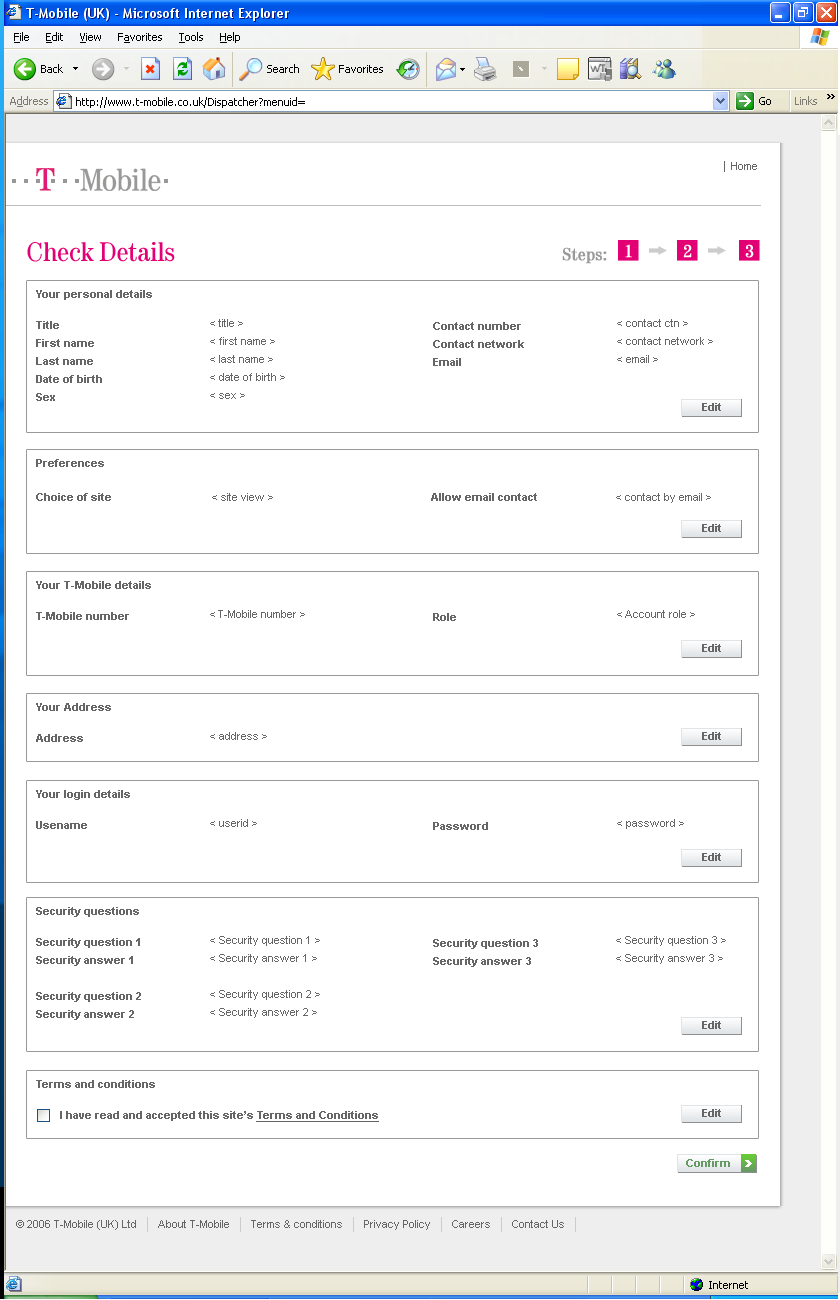
<style>
.page{position:relative;width:840px;height:1300px;background:#ffffff}
.page>*{position:absolute;margin:0}
.t1{font:28px "Tele-Antiqua";color:#e20074}
.t2{font:18px "Tele-Antiqua";color:#ffffff;font-weight:bold}
.t3{font:18px "Tele-Antiqua";color:#999999;font-weight:bold}
.t4{font:11px/18px "Arial-BoldMT";color:#666666}
.t5{font:11px "Arial-BoldMT";color:#666666}
.t6{font:11px/18px "ArialMT";color:#666666}
.t7{font:11px "ArialMT";color:#666666}
.t8{font:11px/18px "Arial-BoldMT";color:#666666;text-decoration:underline}
.t9{font:11px "Arial-BoldMT";color:#669a65}
</style>
<div class="page">
<p class="t1" style="left:27px;top:242px;width:148px;height:20px">Check Details</p>
<p class="t2" style="left:625px;top:244px;width:7px;height:14px">1</p>
<p class="t2" style="left:683px;top:244px;width:9px;height:14px">2</p>
<p class="t2" style="left:745px;top:244px;width:9px;height:14px">3</p>
<p class="t3" style="left:562px;top:247px;width:45px;height:17px">Steps:</p>
<p class="t4" style="left:36px;top:290px;width:116px;height:111px"><span class="t5">Your personal details<br><br></span>Title<br>First name<br>Last name<br>Date of birth<br>Sex</p>
<p class="t6" style="left:210px;top:319px;width:75px;height:80px">&lt; title &gt;<br>&lt; first name &gt;<br>&lt; last name &gt;<br>&lt; date of birth &gt;<br>&lt; sex &gt;</p>
<p class="t4" style="left:433px;top:322px;width:91px;height:44px">Contact number<br>Contact network<br>Email</p>
<p class="t6" style="left:617px;top:319px;width:96px;height:44px">&lt; contact ctn &gt;<br>&lt; contact network &gt;<br>&lt; email &gt;</p>
<p class="t5" style="left:702px;top:403px;width:19px;height:8px">Edit</p>
<p class="t4" style="left:36px;top:459px;width:75px;height:42px"><span class="t5">Preferences<br><br></span>Choice of site</p>
<p class="t7" style="left:212px;top:493px;width:61px;height:8px">&lt; site view &gt;</p>
<p class="t5" style="left:431px;top:493px;width:106px;height:8px">Allow email contact</p>
<p class="t7" style="left:616px;top:493px;width:95px;height:10px">&lt; contact by email &gt;</p>
<p class="t5" style="left:702px;top:524px;width:19px;height:8px">Edit</p>
<p class="t5" style="left:36px;top:581px;width:115px;height:39px">Your T-Mobile details<br><br><span class="t4">T-Mobile number</span></p>
<p class="t7" style="left:210px;top:610px;width:95px;height:8px">&lt; T-Mobile number &gt;</p>
<p class="t5" style="left:433px;top:613px;width:23px;height:8px">Role</p>
<p class="t7" style="left:617px;top:610px;width:78px;height:8px">&lt; Account role &gt;</p>
<p class="t5" style="left:702px;top:644px;width:19px;height:8px">Edit</p>
<p class="t5" style="left:36px;top:703px;width:75px;height:39px">Your Address<br><br><span class="t4">Address</span></p>
<p class="t7" style="left:210px;top:732px;width:57px;height:8px">&lt; address &gt;</p>
<p class="t5" style="left:702px;top:732px;width:19px;height:8px">Edit</p>
<p class="t5" style="left:36px;top:790px;width:94px;height:39px">Your login details<br><br><span class="t4">Usename</span></p>
<p class="t7" style="left:210px;top:819px;width:47px;height:8px">&lt; userid &gt;</p>
<p class="t5" style="left:433px;top:822px;width:55px;height:8px">Password</p>
<p class="t7" style="left:617px;top:819px;width:67px;height:10px">&lt; password &gt;</p>
<p class="t5" style="left:702px;top:853px;width:19px;height:8px">Edit</p>
<p class="t4" style="left:36px;top:907px;width:105px;height:113px"><span class="t5">Security questions<br><br></span>Security question 1<br>Security answer 1<br><br>Security question 2<br>Security answer 2</p>
<p class="t6" style="left:210px;top:936px;width:110px;height:82px">&lt; Security question 1 &gt;<br>&lt; Security answer 1 &gt;<br><br>&lt; Security question 2 &gt;<br>&lt; Security answer 2 &gt;</p>
<p class="t4" style="left:433px;top:939px;width:105px;height:28px">Security question 3<br>Security answer 3</p>
<p class="t6" style="left:616px;top:936px;width:110px;height:28px">&lt; Security question 3 &gt;<br>&lt; Security answer 3 &gt;</p>
<p class="t5" style="left:702px;top:1021px;width:19px;height:8px">Edit</p>
<p class="t4" style="left:36px;top:1080px;width:343px;height:42px"><span class="t5">Terms and conditions<br><br></span>        I have read and accepted this site’s <span class="t8">Terms and Conditions</span></p>
<p class="t5" style="left:702px;top:1109px;width:19px;height:8px">Edit</p>
<p class="t9" style="left:686px;top:1159px;width:44px;height:8px">Confirm</p>
</div>
